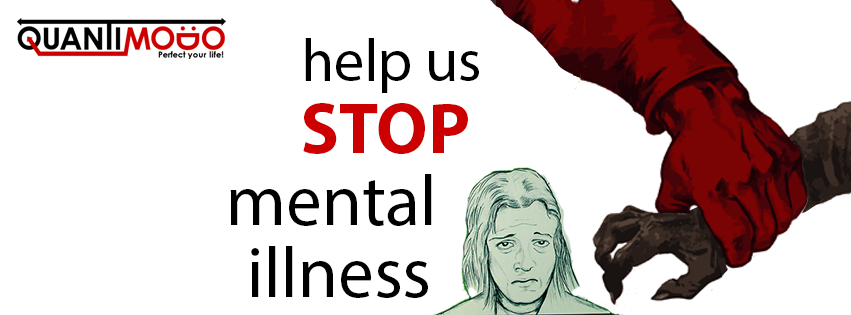
<style>
.page{position:relative;width:851px;height:315px;background:#ffffff}
.page>*{position:absolute;margin:0}
.t1{font:72px/72px "MyriadPro-Regular";color:#000000}
.t2{font:60px/72px "MyriadPro-Regular";color:#000000}
.t3{font:72px/72px "MyriadPro-Bold";color:#cc0000}
</style>
<div class="page">
<p class="t1" style="left:230px;top:38px;width:249px;height:260px;text-align:center"><span class="t2">              help us     <br>      </span><span class="t3">STOP<br></span>mental <br>illness</p>
</div>
